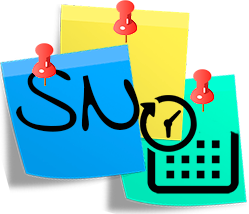
<style>
.page{position:relative;width:249px;height:214px;background:#ffffff}
.page>*{position:absolute;margin:0}
.t1{font:104.2px "IndieFlower";color:#000000}
</style>
<div class="page">
<p class="t1" style="left:16px;top:68px;width:124px;height:64px">SN</p>
</div>
